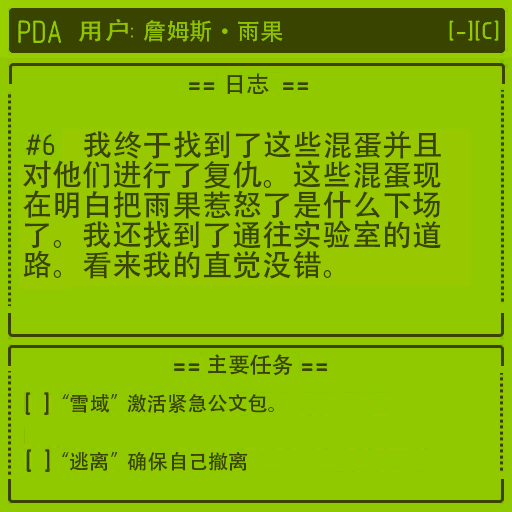
<style>
.page{position:relative;width:512px;height:512px;background:#90c900}
.page>*{position:absolute;margin:0}
.t1{font:30px/30px "AdobeHeitiStd-Regular";color:#384400}
</style>
<div class="page">
<p class="t1" style="left:23px;top:130px;width:418px;height:149px">我终于找到了这些混蛋并且<br>对他们进行了复仇。这些混蛋现<br>在明白把雨果惹怒了是什么下场<br>了。我还找到了通往实验室的道<br>路。看来我的直觉没错。</p>
</div>
